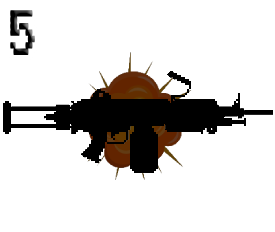
<style>
.page{position:relative;width:275px;height:232px;background:#ffffff}
.page>*{position:absolute;margin:0}
.t1{font:80px "VT323-Regular"}
.t2{font:24px "DelaGothicOne-Regular"}
</style>
<div class="page">
<p class="t1" style="left:10px;top:10px;width:25px;height:45px"><span class="t2"><br></span>5</p>
</div>
